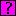
<style>
.page{position:relative;width:16px;height:16px;background:#ff00ff}
.page>*{position:absolute;margin:0}
.t1{font:17.7px "MyriadPro-Regular";color:#000000}
</style>
<div class="page">
<p class="t1" style="left:6px;top:2px;width:6px;height:12px">?</p>
</div>
